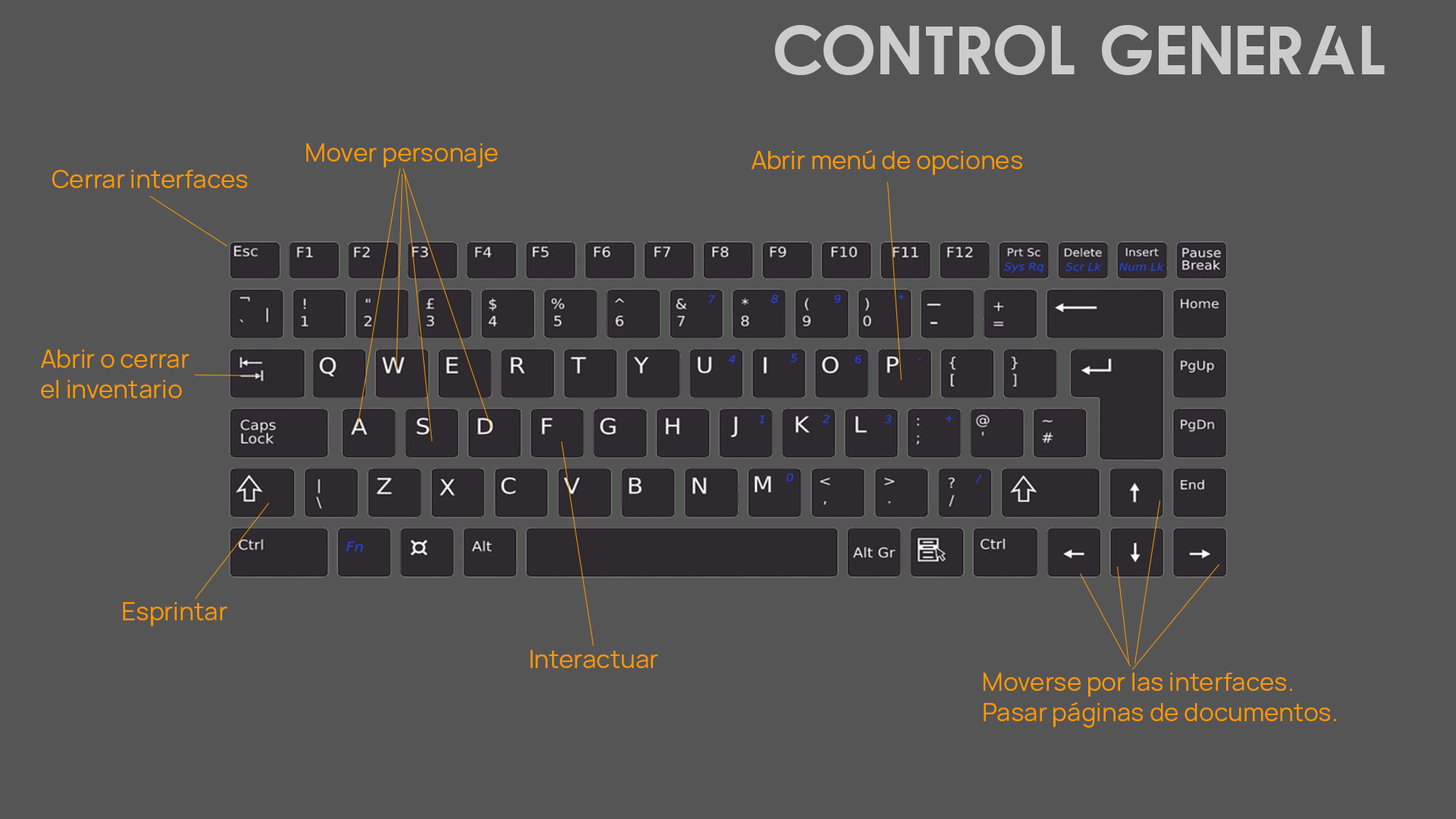
<style>
.page{position:relative;width:1456px;height:819px;background:#565555}
.page>*{position:absolute;margin:0}
.t1{font:70.6px "Qualy-Bold";color:#cccccc}
.t2{font:25.2px "Manrope-Regular";color:#ff9900}
</style>
<div class="page">
<p class="t1" style="left:775px;top:25px;width:610px;height:50px">Control GENERAL</p>
<p class="t2" style="left:306px;top:143px;width:191px;height:25px">Mover personaje</p>
<p class="t2" style="left:751px;top:149px;width:271px;height:26px">Abrir menú de opciones</p>
<p class="t2" style="left:52px;top:170px;width:195px;height:18px">Cerrar interfaces</p>
<p class="t2" style="left:41px;top:350px;width:149px;height:48px">Abrir o cerrar <br>el inventario</p>
<p class="t2" style="left:123px;top:602px;width:104px;height:24px">Esprintar</p>
<p class="t2" style="left:530px;top:650px;width:128px;height:18px">Interactuar</p>
<p class="t2" style="left:984px;top:673px;width:352px;height:55px">Moverse por las interfaces.<br>Pasar páginas de documentos.</p>
</div>
